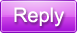
<style>
.page{position:relative;width:77px;height:33px}
.page>*{position:absolute;margin:0}
.t1{font:20px "ArialMT";color:#ffffff}
</style>
<div class="page">
<p class="t1" style="left:14px;top:7px;width:50px;height:20px">Reply</p>
</div>
